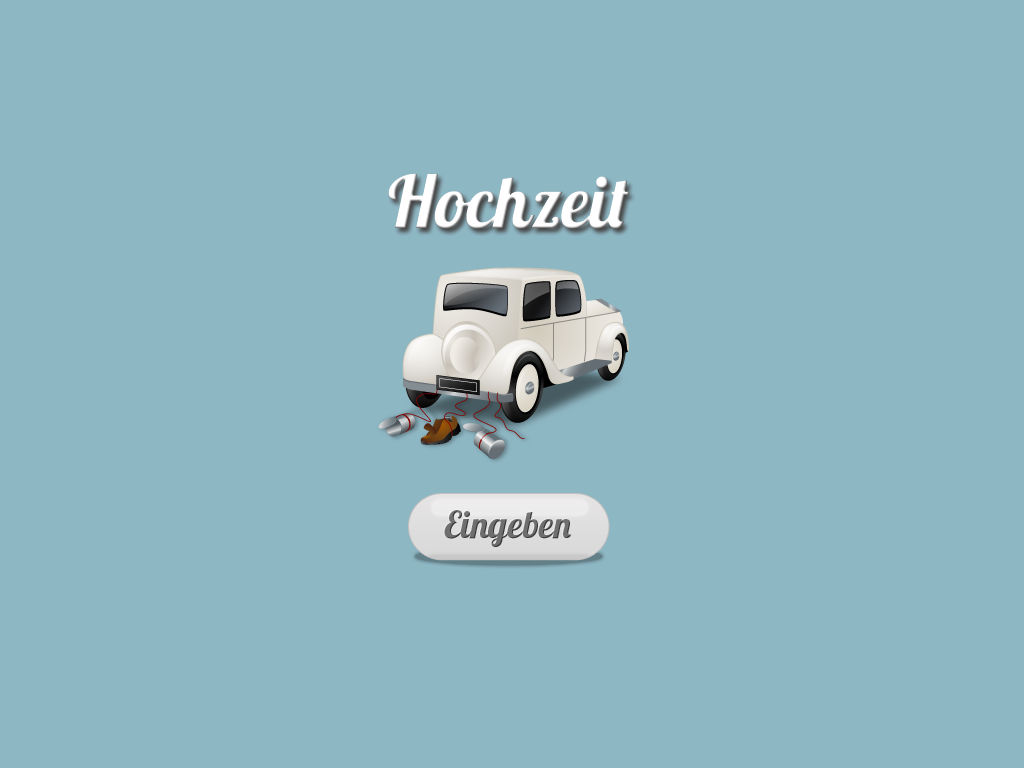
<style>
.page{position:relative;width:1024px;height:768px;background:#8eb7c4}
.page>*{position:absolute;margin:0}
.t1{font:72px "Lobster1.4";color:#ffffff}
.t2{font:37.3px "Lobster1.4";color:#6f6e6e}
</style>
<div class="page">
<p class="t1" style="left:388px;top:173px;width:242px;height:56px">Hochzeit</p>
<p class="t2" style="left:444px;top:510px;width:127px;height:37px">Eingeben</p>
</div>
